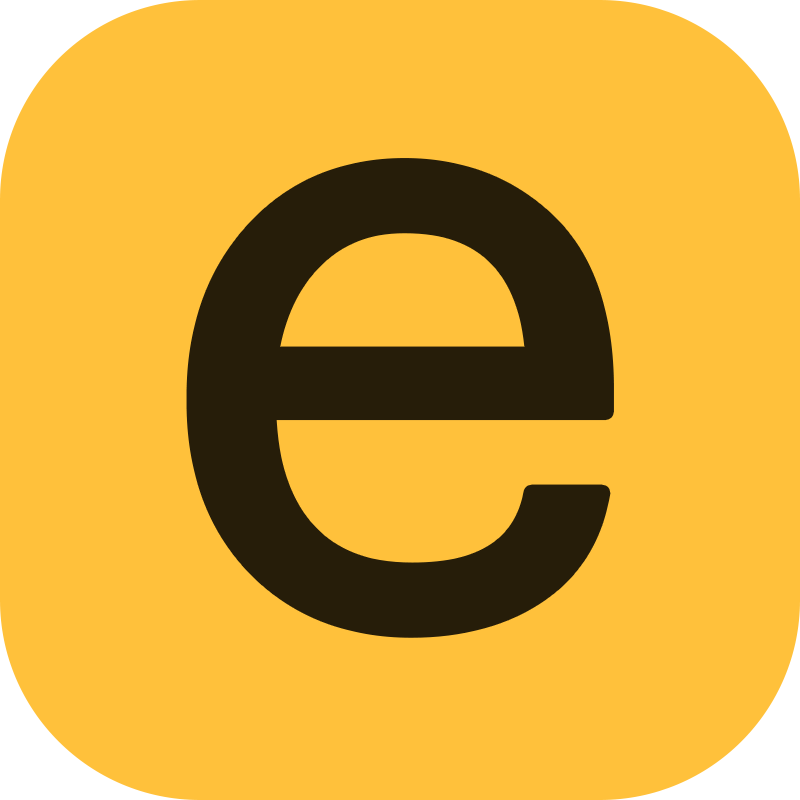
<style>
.page{position:relative;width:800px;height:800px;background:#ffc13b}
.page>*{position:absolute;margin:0}
.t1{font:857px "Graphik-Regular";color:#261d09}
</style>
<div class="page">
<p class="t1" style="left:194px;top:166px;width:412px;height:464px">e</p>
</div>
